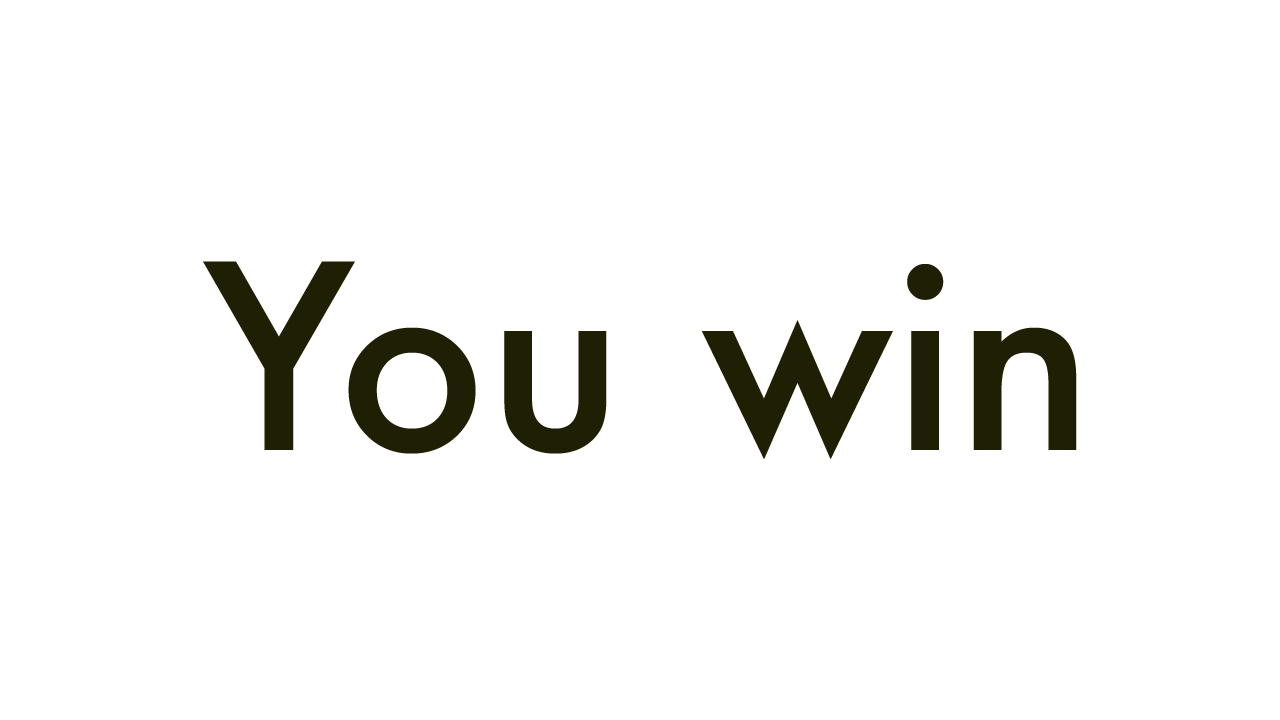
<style>
.page{position:relative;width:1280px;height:720px;background:#ffffff}
.page>*{position:absolute;margin:0}
.t1{font:250px "Futura-Medium";color:#1f1f03}
</style>
<div class="page">
<p class="t1" style="left:203px;top:261px;width:874px;height:198px">You win</p>
</div>
